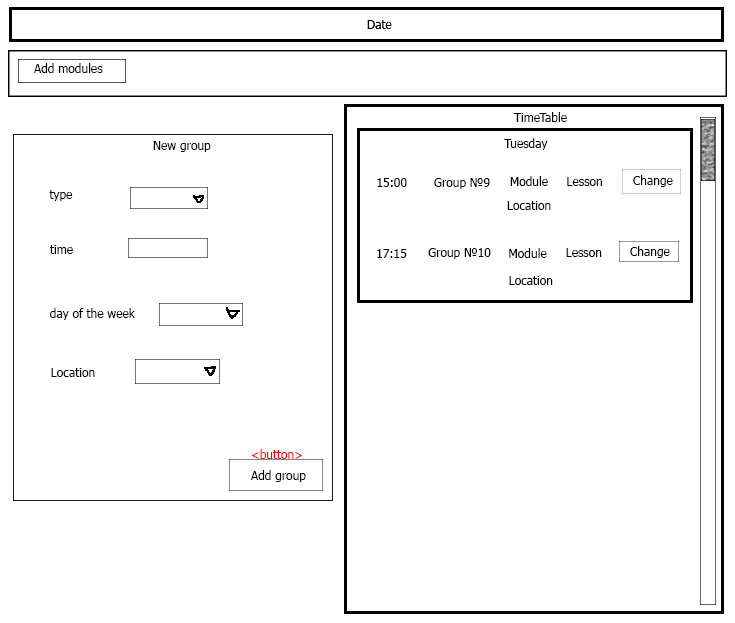
<style>
.page{position:relative;width:735px;height:623px;background:#ffffff}
.page>*{position:absolute;margin:0}
.t1{font:12px "Tahoma";color:#000000}
.t2{font:12px "Tahoma";color:#ff0202}
</style>
<div class="page">
<p class="t1" style="left:34px;top:63px;width:69px;height:10px">Add modules</p>
<p class="t1" style="left:513px;top:112px;width:54px;height:10px">TimeTable</p>
<p class="t1" style="left:153px;top:141px;width:58px;height:11px">New group</p>
<p class="t1" style="left:504px;top:138px;width:44px;height:12px">Tuesday</p>
<p class="t1" style="left:377px;top:178px;width:30px;height:9px">15:00</p>
<p class="t1" style="left:434px;top:178px;width:56px;height:11px">Group №9</p>
<p class="t1" style="left:510px;top:176px;width:38px;height:10px">Module</p>
<p class="t1" style="left:567px;top:177px;width:35px;height:9px">Lesson</p>
<p class="t1" style="left:633px;top:175px;width:40px;height:12px">Change</p>
<p class="t1" style="left:49px;top:190px;width:24px;height:11px">type</p>
<p class="t1" style="left:507px;top:201px;width:44px;height:9px">Location</p>
<p class="t1" style="left:50px;top:245px;width:23px;height:9px">time</p>
<p class="t1" style="left:630px;top:246px;width:40px;height:12px">Change</p>
<p class="t1" style="left:377px;top:249px;width:30px;height:9px">17:15</p>
<p class="t1" style="left:428px;top:248px;width:63px;height:11px">Group №10</p>
<p class="t1" style="left:509px;top:248px;width:38px;height:10px">Module</p>
<p class="t1" style="left:566px;top:248px;width:36px;height:9px">Lesson</p>
<p class="t1" style="left:509px;top:276px;width:44px;height:9px">Location</p>
<p class="t1" style="left:50px;top:308px;width:85px;height:12px">day of the week</p>
<p class="t1" style="left:51px;top:368px;width:44px;height:9px">Location</p>
<p class="t2" style="left:252px;top:449px;width:50px;height:10px">&lt;button&gt;</p>
<p class="t1" style="left:251px;top:470px;width:55px;height:12px">Add group</p>
</div>
